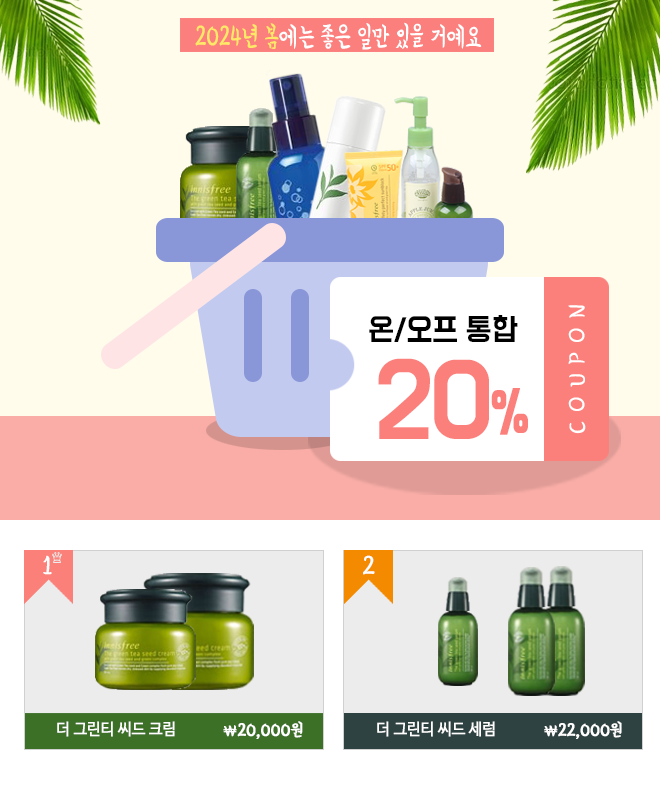
<style>
.page{position:relative;width:660px;height:800px;background:#fffceb}
.page>*{position:absolute;margin:0}
.t1{font:27.9px "BMYEONSUNG";letter-spacing:-0.01em;color:#ffffff;scale:0.84 1}
.t2{font:27.9px "BMYEONSUNG";letter-spacing:-0.01em;color:#ffe967;scale:0.84 1}
.t3{font:23.7px "BMYEONSUNG";letter-spacing:0.395em;color:#ffffff;text-transform:uppercase}
.t4{font:27.4px "BMDoHyeon";letter-spacing:-0.025em;color:#000000}
.t5{font:92.7px "BMDoHyeon";letter-spacing:-0.025em;color:#fb807b}
.t6{font:50.5px "BMDoHyeon";letter-spacing:-0.025em;color:#fb807b;font-weight:bold;scale:0.83 1}
.t7{font:26px "BMYEONSUNG";letter-spacing:0.395em;color:#ffffff;text-transform:uppercase}
.t8{font:15.9px "NanumBarunGothic";letter-spacing:-0.025em;color:#ffffff;font-weight:bold;scale:0.96 1}
.t9{font:18px "BMYEONSUNG";letter-spacing:-0.025em;color:#ffffff;font-weight:bold}
.t10{font:14px "BMYEONSUNG";letter-spacing:-0.025em;color:#ffffff;font-weight:bold}
</style>
<div class="page">
<p class="t1" style="left:195px;top:22px;width:287px;height:28px"><span class="t2">2024년 봄</span>에는 좋은 일만 있을 거예요</p>
<p class="t3" style="left:568px;top:305px;width:18px;height:129px;rotate:-90deg">coupon</p>
<p class="t4" style="left:369px;top:315px;width:159px;height:124px;text-align:center">온/오프 통합<br><span class="t5">20</span><span class="t6">%</span></p>
<p class="t7" style="left:43px;top:555px;width:9px;height:20px">1</p>
<p class="t7" style="left:363px;top:555px;width:12px;height:20px">2</p>
<p class="t8" style="left:57px;top:721px;width:118px;height:16px">더 그린티 씨드 크림</p>
<p class="t9" style="left:223px;top:721px;width:80px;height:18px"><span class="t10">\</span>20,000원</p>
<p class="t8" style="left:377px;top:721px;width:118px;height:16px">더 그린티 씨드 세럼</p>
<p class="t9" style="left:544px;top:721px;width:78px;height:18px"><span class="t10">\</span>22,000원</p>
</div>
